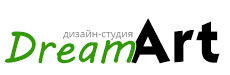
<style>
.page{position:relative;width:230px;height:75px;background:#ffffff}
.page>*{position:absolute;margin:0}
.t1{font:10px "OpenSans";color:#7e7e7e}
.t2{font:60px "KabelCTT-MediumBold";letter-spacing:0.05em;color:#000000}
.t3{font:45px "MVBoli";color:#319a00}
</style>
<div class="page">
<p class="t1" style="left:63px;top:29px;width:70px;height:11px">дизайн-студия</p>
<p class="t2" style="left:125px;top:18px;width:95px;height:46px">Art</p>
<p class="t3" style="left:4px;top:31px;width:132px;height:33px">Dream</p>
</div>
